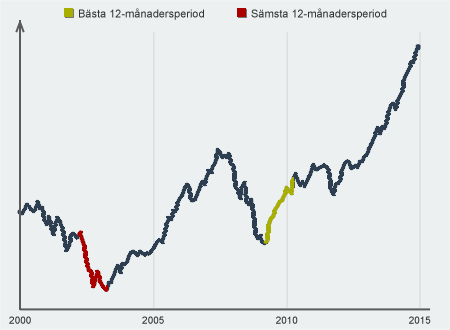
<style>
.page{position:relative;width:450px;height:330px;background:#ecf0f1}
.page>*{position:absolute;margin:0}
.t1{font:11px "ArialMT";color:#333333}
.t2{font:10px "ArialMT";color:#333333}
</style>
<div class="page">
<p class="t1" style="left:79px;top:8px;width:125px;height:12px">Bästa 12-månadersperiod</p>
<p class="t1" style="left:251px;top:8px;width:136px;height:12px">Sämsta 12-månadersperiod</p>
<p class="t2" style="left:9px;top:316px;width:22px;height:8px">2000</p>
<p class="t2" style="left:142px;top:316px;width:22px;height:8px">2005</p>
<p class="t2" style="left:276px;top:316px;width:22px;height:8px">2010</p>
<p class="t2" style="left:409px;top:316px;width:22px;height:8px">2015</p>
</div>
